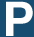
<style>
.page{position:relative;width:34px;height:37px;background:#174d70}
.page>*{position:absolute;margin:0}
.t1{font:48px "HelveticaNeue-Bold";color:#ffffff;text-transform:uppercase}
</style>
<div class="page">
<p class="t1" style="left:6px;top:1px;width:27px;height:35px">P</p>
</div>
